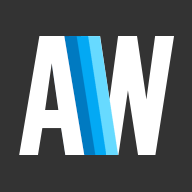
<style>
.page{position:relative;width:192px;height:192px;background:#333333}
.page>*{position:absolute;margin:0}
.t1{font:134.2px "Bebas";color:#ffffff}
</style>
<div class="page">
<p class="t1" style="left:19px;top:36px;width:66px;height:119px">A</p>
<p class="t1" style="left:81px;top:36px;width:93px;height:119px">W</p>
</div>
